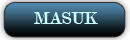
<style>
.page{position:relative;width:130px;height:40px}
.page>*{position:absolute;margin:0}
.t1{font:18px "Modern-Regular";color:#ccffff}
</style>
<div class="page">
<p class="t1" style="left:34px;top:12px;width:64px;height:12px">MASUK</p>
</div>
